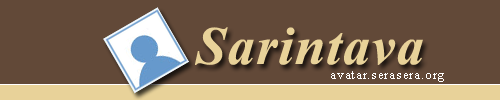
<style>
.page{position:relative;width:500px;height:100px;background:#624938}
.page>*{position:absolute;margin:0}
.t1{font:54px "TimesNewRomanPS-BoldItalicMT";color:#e8d299;font-weight:bold}
.t2{font:13px "TimesNewRomanPSMT";letter-spacing:0.06em;color:#ffffff}
</style>
<div class="page">
<p class="t1" style="left:194px;top:19px;width:231px;height:62px">Sarintava</p>
<p class="t2" style="left:330px;top:68px;width:115px;height:15px">avatar.serasera.org</p>
</div>
